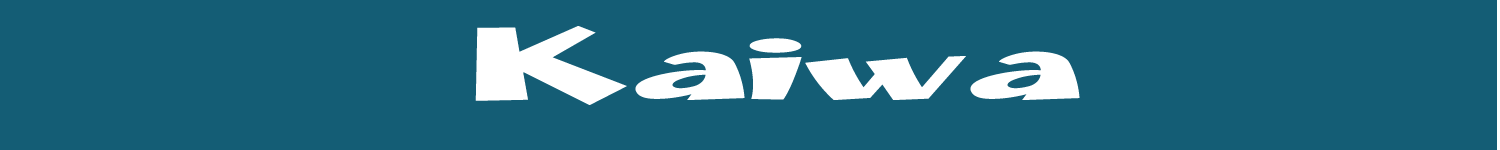
<style>
.page{position:relative;width:1500px;height:150px;background:#145d75}
.page>*{position:absolute;margin:0}
.t1{font:100px "FoliaMix";color:#ffffff;scale:2.1 1}
</style>
<div class="page">
<p class="t1" style="left:475px;top:26px;width:605px;height:79px">Kaiwa</p>
</div>
